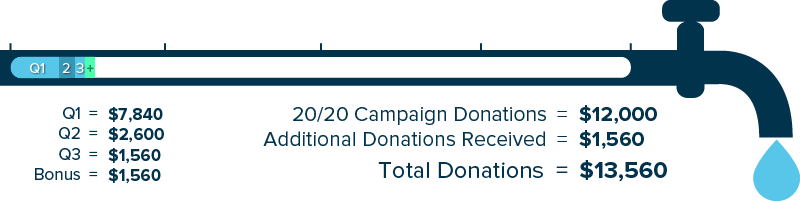
<style>
.page{position:relative;width:800px;height:201px;background:#ffffff}
.page>*{position:absolute;margin:0}
.t1{font:14px "ProximaNova-Regular";color:#ffffff}
.t2{font:14px "ProximaNova-Bold";color:#1a8355}
.t3{font:17px "ProximaNova-Regular";color:#02334d}
.t4{font:17px "ProximaNova-Bold";color:#02334d}
.t5{font:21px "ProximaNova-Regular";color:#02334d}
.t6{font:24px/32px "ProximaNova-Regular";color:#02334d}
.t7{font:24px/5px "ProximaNova-Regular";color:#02334d}
.t8{font:24px "ProximaNova-Regular";color:#02334d}
.t9{font:21px "ProximaNova-Bold";color:#02334d}
.t10{font:24px/32px "ProximaNova-Bold";color:#02334d}
.t11{font:24px "ProximaNova-Bold";color:#02334d}
</style>
<div class="page">
<p class="t1" style="left:30px;top:63px;width:14px;height:11px">Q1</p>
<p class="t1" style="left:62px;top:63px;width:8px;height:10px">2</p>
<p class="t1" style="left:76px;top:63px;width:8px;height:10px">3</p>
<p class="t2" style="left:87px;top:64px;width:7px;height:8px">+</p>
<p class="t3" style="left:35px;top:107px;width:63px;height:73px;text-align:right">Q1  =<br>Q2  =<br>Q3  =<br>Bonus  =</p>
<p class="t4" style="left:108px;top:107px;width:56px;height:77px">$7,840<br>$2,600<br>$1,560<br>$1,560</p>
<p class="t5" style="left:263px;top:107px;width:305px;height:71px;text-align:right">20/20 Campaign Donations  =<br>Additional Donations Received  =<br><span class="t6">To</span><span class="t7">t</span><span class="t8">al Donations  =</span></p>
<p class="t9" style="left:579px;top:105px;width:88px;height:77px">$12,000<br>$1,560<br><span class="t10">$</span><span class="t11">13,560</span></p>
</div>
